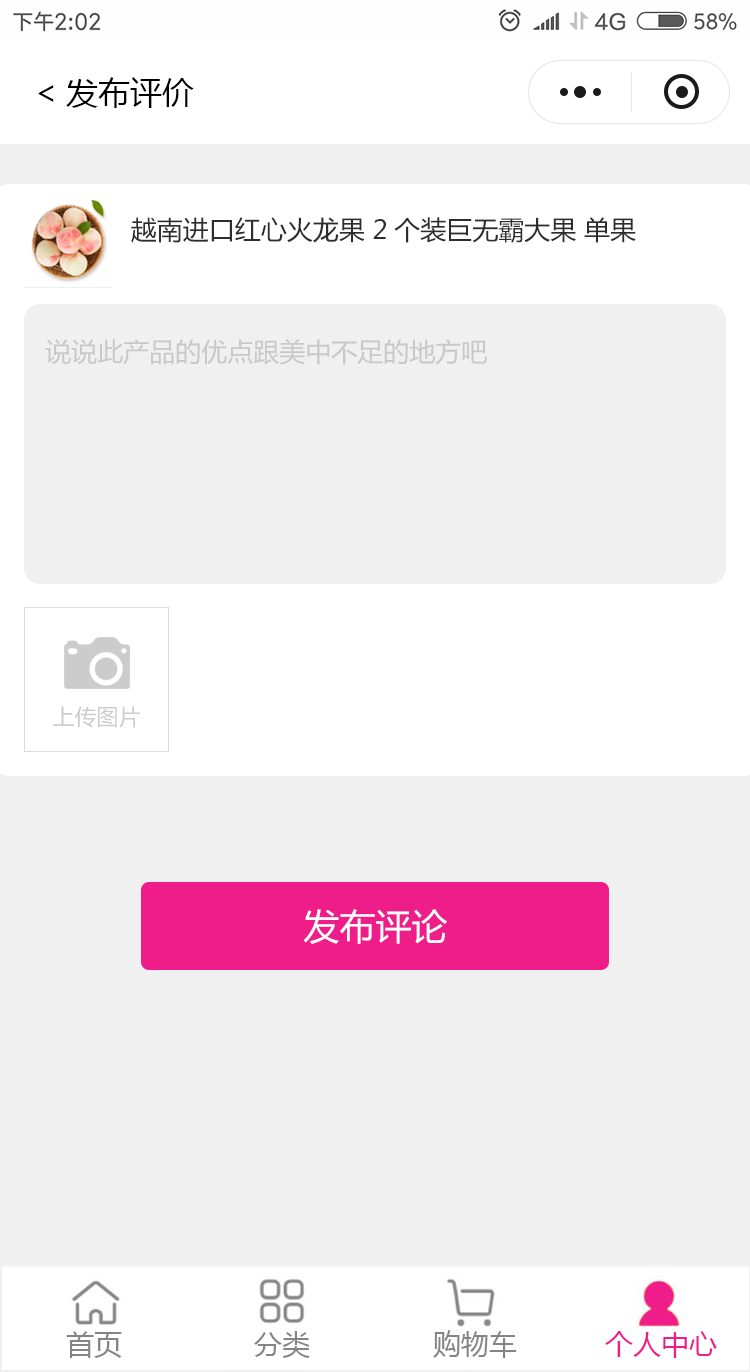
<style>
.page{position:relative;width:750px;height:1372px;background:#f0f0f0}
.page>*{position:absolute;margin:0}
.t1{font:32px "MicrosoftYaHei";color:#000000}
.t2{font:26px "MicrosoftYaHei";color:#2d2d2d}
.t3{font:26px "MicrosoftYaHei";color:#c9c8c8}
.t4{font:22px "MicrosoftYaHei";color:#cccccc}
.t5{font:36px "MicrosoftYaHei";color:#ffffff}
</style>
<div class="page">
<p class="t1" style="left:38px;top:77px;width:156px;height:31px">&lt;发布评价</p>
<p class="t2" style="left:131px;top:217px;width:505px;height:26px">越南进口红心火龙果 2个装巨无霸大果 单果</p>
<p class="t3" style="left:45px;top:339px;width:442px;height:26px">说说此产品的优点跟美中不足的地方吧</p>
<p class="t4" style="left:53px;top:706px;width:87px;height:22px">上传图片</p>
<p class="t5" style="left:303px;top:909px;width:144px;height:35px">发布评论</p>
</div>
